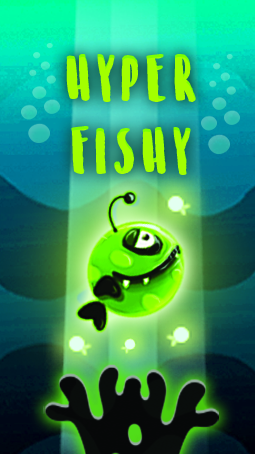
<style>
.page{position:relative;width:255px;height:454px}
.page>*{position:absolute;margin:0}
.t1{font:60.8px "SunriseInternationalDemo";letter-spacing:0.12em;color:#a3ff00;text-transform:uppercase}
</style>
<div class="page">
<p class="t1" style="left:66px;top:54px;width:130px;height:121px;text-align:center">hyper<br>fishy</p>
</div>
